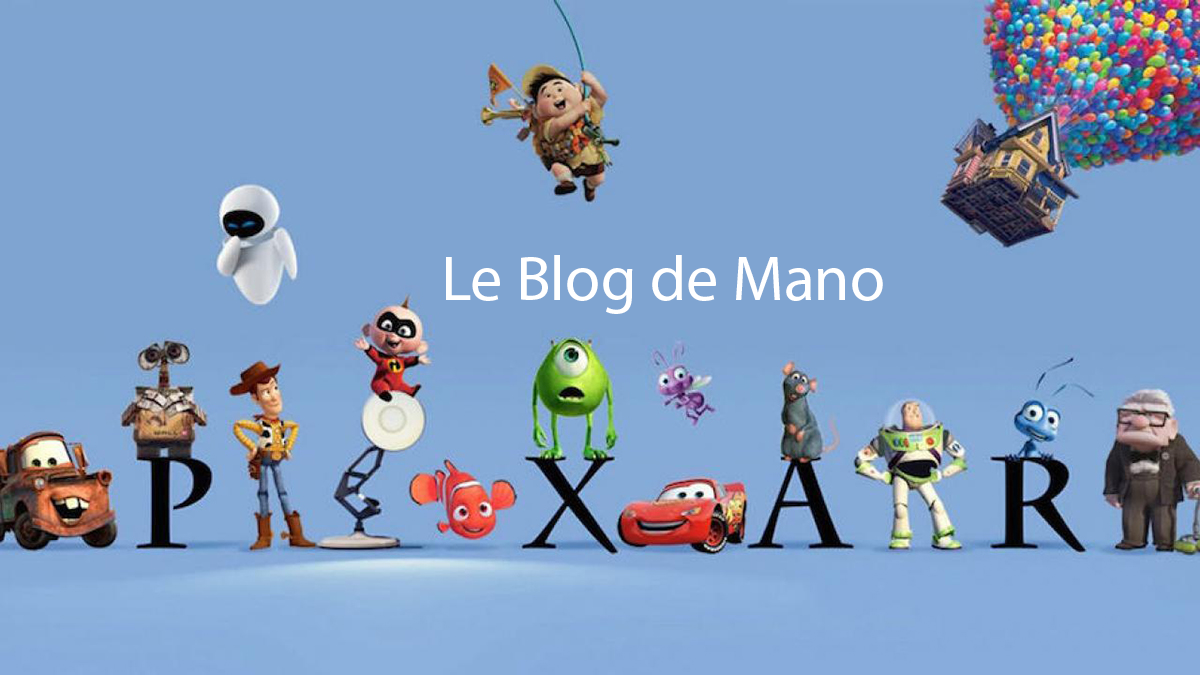
<style>
.page{position:relative;width:1200px;height:675px;background:#7fa4d1}
.page>*{position:absolute;margin:0}
.t1{font:64px "MyriadPro-Regular";color:#ffffff}
</style>
<div class="page">
<p class="t1" style="left:446px;top:255px;width:437px;height:59px">Le Blog de Mano</p>
</div>
